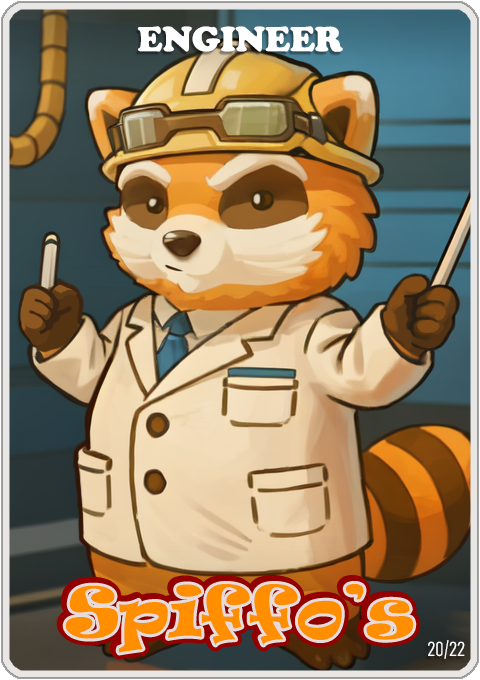
<style>
.page{position:relative;width:480px;height:680px}
.page>*{position:absolute;margin:0}
.t1{font:36px "CooperBlack";color:#ffffff}
.t2{font:65px "Ravie";color:#ff8e00}
.t3{font:20px "Bahnschrift-LightCondensed";color:#ffffff}
</style>
<div class="page">
<p class="t1" style="left:137px;top:26px;width:206px;height:26px">ENGINEER</p>
<p class="t2" style="left:65px;top:584px;width:349px;height:69px">Spiffo’s</p>
<p class="t3" style="left:428px;top:640px;width:37px;height:19px">20/22</p>
</div>
